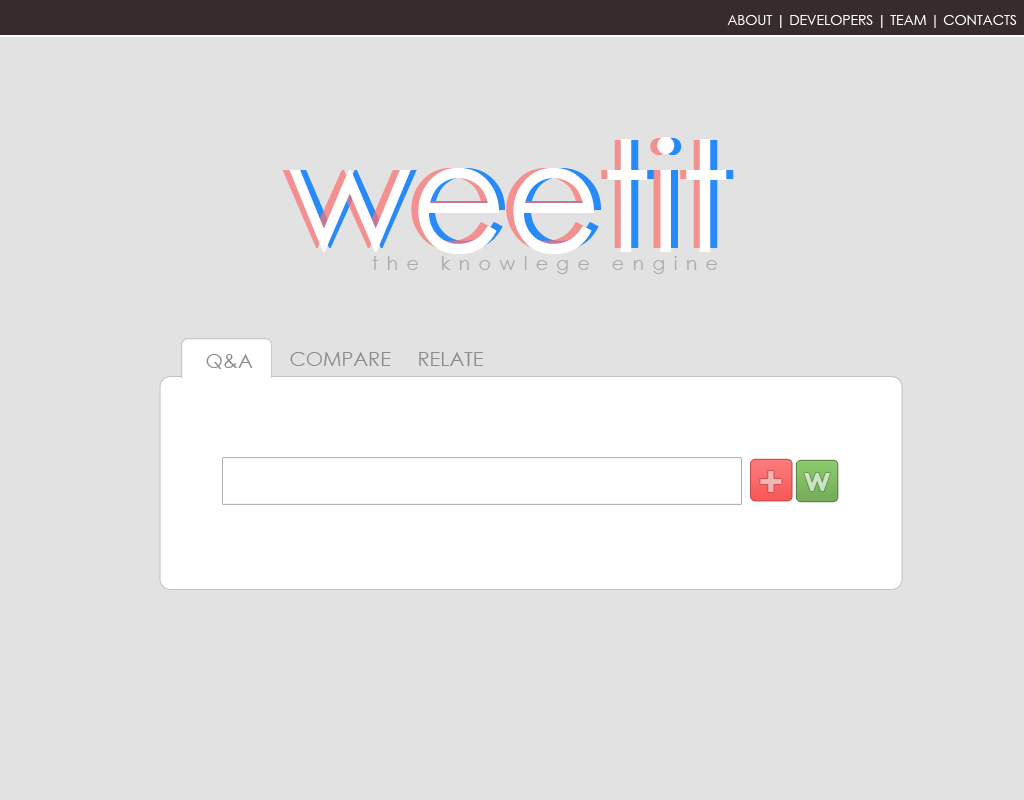
<style>
.page{position:relative;width:1024px;height:800px;background:#e2e2e2}
.page>*{position:absolute;margin:0}
.t1{font:13.8px "CenturyGothic";color:#ffffff;text-transform:uppercase}
.t2{font:154px "CenturyGothic";color:#ffffff;scale:0.95 1}
.t3{font:146.6px "CenturyGothic"}
.t4{font:18.5px "CenturyGothic";letter-spacing:0.42em;color:#a3a1a1;scale:1.05 1}
.t5{font:20px "CenturyGothic";color:#8c8c8c;text-transform:uppercase}
.t6{font:43.3px "CenturyGothic-Bold";letter-spacing:0.42em;color:#edb8b8}
.t7{font:33px "CenturyGothic-Bold";letter-spacing:0.42em;color:#cce4c0}
</style>
<div class="page">
<p class="t1" style="left:727px;top:15px;width:290px;height:13px">About | Developers | Team | Contacts</p>
<p class="t2" style="left:289px;top:137px;width:438px;height:117px">weetit</p>
<p class="t3" style="left:282px;top:138px;width:439px;height:112px">weetit</p>
<p class="t3" style="left:295px;top:138px;width:439px;height:112px">weetit</p>
<p class="t4" style="left:372px;top:256px;width:345px;height:18px;opacity:0.83">the knowlege engine</p>
<p class="t5" style="left:290px;top:352px;width:101px;height:14px">Compare</p>
<p class="t5" style="left:419px;top:352px;width:64px;height:14px">Relate</p>
<p class="t5" style="left:206px;top:354px;width:47px;height:15px">Q&amp;A</p>
<p class="t6" style="left:760px;top:471px;width:22px;height:21px">+</p>
<p class="t7" style="left:804px;top:473px;width:26px;height:18px">w</p>
</div>
